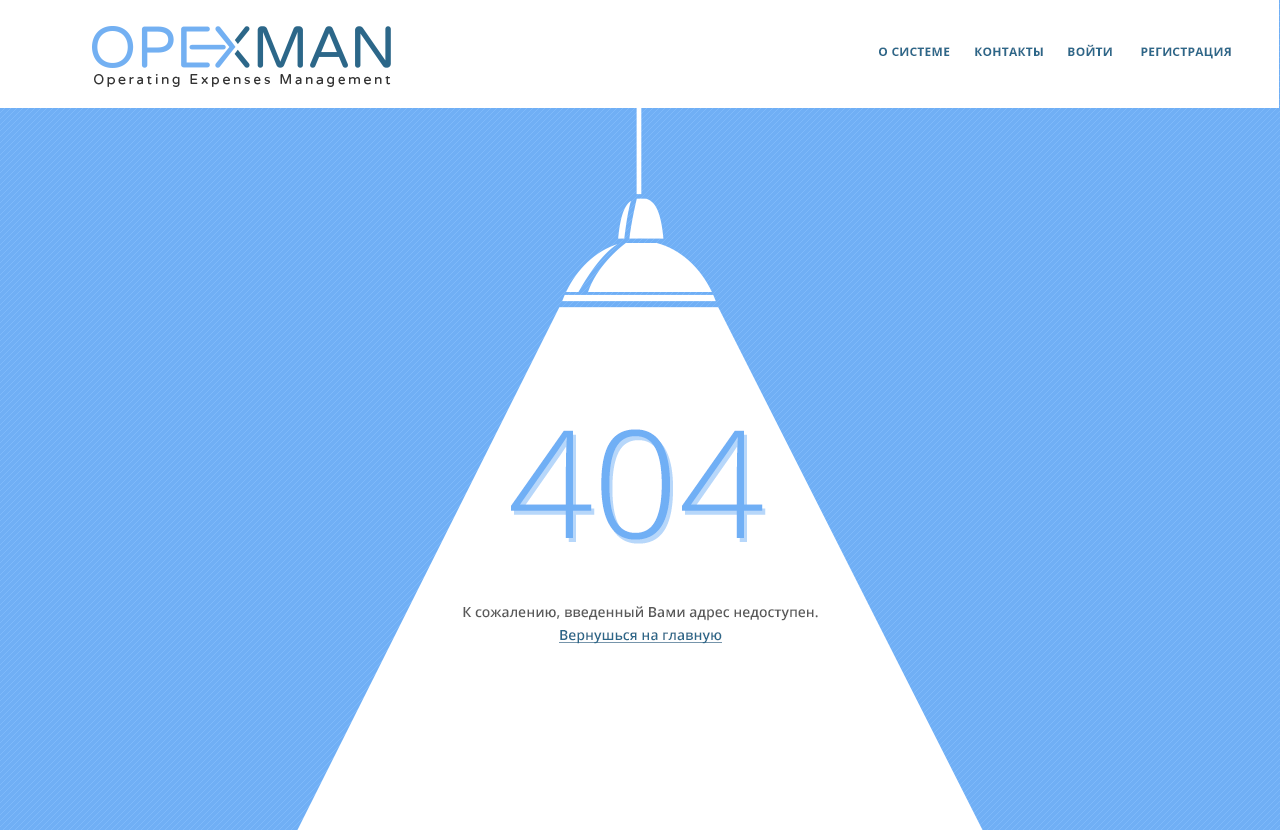
<style>
.page{position:relative;width:1280px;height:830px;background:#70aff5}
.page>*{position:absolute;margin:0}
.t1{font:12px "OpenSans-Bold";letter-spacing:0.025em;color:#2c6789;text-transform:uppercase}
.t2{font:149.4px "OpenSans-Light";color:#70aff5}
.t3{font:13.9px "OpenSans-Semibold";color:#595959}
.t4{font:13.9px "OpenSans-Semibold";color:#2c6789;text-decoration:underline}
</style>
<div class="page">
<p class="t1" style="left:879px;top:47px;width:71px;height:9px">О системе</p>
<p class="t1" style="left:975px;top:47px;width:68px;height:9px">Контакты</p>
<p class="t1" style="left:1068px;top:44px;width:44px;height:12px">Войти</p>
<p class="t1" style="left:1141px;top:47px;width:90px;height:12px">РЕГИСТРация</p>
<p class="t2" style="left:511px;top:429px;width:252px;height:111px">404</p>
<p class="t3" style="left:463px;top:606px;width:355px;height:15px">К сожалению, введенный Вами адрес недоступен.</p>
<p class="t4" style="left:559px;top:630px;width:163px;height:14px">Вернушься на главную</p>
</div>
